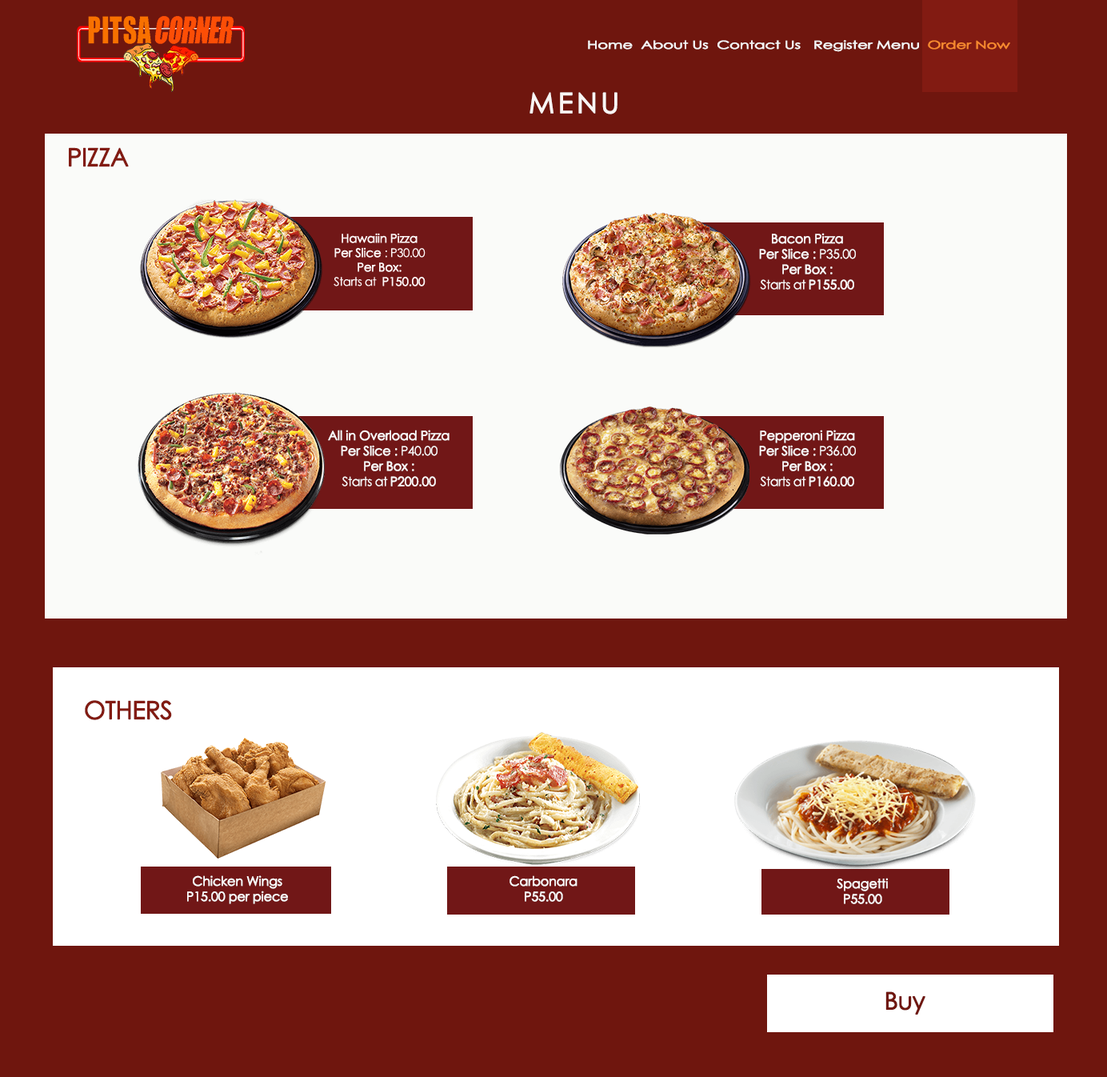
<style>
.page{position:relative;width:1107px;height:1077px;background:#6f160e}
.page>*{position:absolute;margin:0}
.t1{font:11.2px "CenturyGothic";letter-spacing:-0.035em;color:#f5f5f5;font-weight:bold;scale:1.41 1}
.t2{font:11.2px "CenturyGothic";letter-spacing:-0.035em;color:#f7882f;font-weight:bold;scale:1.41 1}
.t3{font:28px "CenturyGothic";letter-spacing:0.1em;color:#f9f5f4;font-weight:bold}
.t4{font:24.8px "CenturyGothic";letter-spacing:-0.035em;color:#821b12;font-weight:bold}
.t5{font:12.8px "CenturyGothic";letter-spacing:-0.035em;color:#fbf9f9;font-weight:bold}
.t6{font:12.8px "CenturyGothic";letter-spacing:-0.035em;color:#fbf9f9}
.t7{font:12.8px "CenturyGothic";letter-spacing:-0.035em;color:#fafafa;font-weight:bold}
.t8{font:24px "CenturyGothic";letter-spacing:-0.035em;color:#70170f;font-weight:bold}
</style>
<div class="page">
<p class="t1" style="left:588px;top:40px;width:422px;height:12px">Home  About Us  Contact Us   Register Menu  <span class="t2">Order Now</span></p>
<p class="t3" style="left:530px;top:92px;width:88px;height:22px">MENU</p>
<p class="t4" style="left:69px;top:147px;width:60px;height:20px">PIZZA</p>
<p class="t5" style="left:759px;top:233px;width:97px;height:57px;text-align:center">Bacon Pizza<br>Per Slice :<span class="t6"> P35.00<br></span>Per Box :<br><span class="t6">Starts at </span>P155.00</p>
<p class="t5" style="left:328px;top:430px;width:122px;height:56px;text-align:center">All in Overload Pizza<br>Per Slice :<span class="t6"> P40.00<br></span>Per Box :<br><span class="t6">Starts at </span>P200.00</p>
<p class="t5" style="left:759px;top:430px;width:97px;height:56px;text-align:center">Pepperoni Pizza<br>Per Slice :<span class="t6"> P36.00<br></span>Per Box :<br><span class="t6">Starts at </span>P160.00</p>
<p class="t4" style="left:85px;top:700px;width:87px;height:20px">OTHERS</p>
<p class="t7" style="left:187px;top:875px;width:101px;height:29px;text-align:center">Chicken Wings<br>P15.00 per piece</p>
<p class="t7" style="left:510px;top:875px;width:68px;height:27px;text-align:center">Carbonara <br>P55.00</p>
<p class="t7" style="left:837px;top:878px;width:51px;height:26px;text-align:center">Spagetti<br>P55.00</p>
<p class="t8" style="left:886px;top:991px;width:40px;height:23px">Buy</p>
</div>
